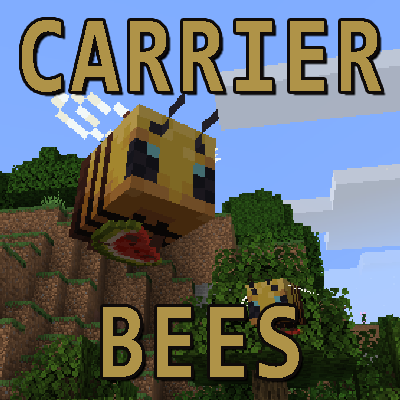
<style>
.page{position:relative;width:400px;height:400px}
.page>*{position:absolute;margin:0}
.t1{font:110px "Consolas-Bold";letter-spacing:0.05em;color:#af9348;scale:0.8 1}
</style>
<div class="page">
<p class="t1" style="left:22px;top:20px;width:359px;height:72px">CARRIER</p>
<p class="t1" style="left:103px;top:306px;width:196px;height:72px">BEES</p>
</div>
